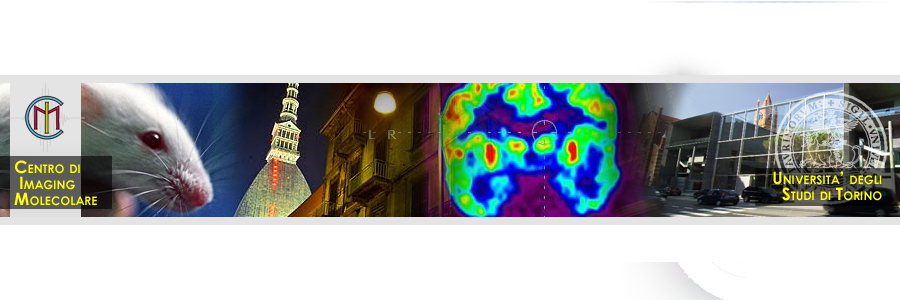
<style>
.page{position:relative;width:900px;height:300px;background:#ffffff}
.page>*{position:absolute;margin:0}
.t1{font:17px/16px "CenturyGothic-Bold";color:#ffff00;font-variant:small-caps}
</style>
<div class="page">
<p class="t1" style="left:14px;top:160px;width:83px;height:46px">Centro di <br> Imaging<br>Molecolare</p>
<p class="t1" style="left:773px;top:171px;width:109px;height:30px;text-align:right">Universita’ degli<br>Studi di Torino</p>
</div>
